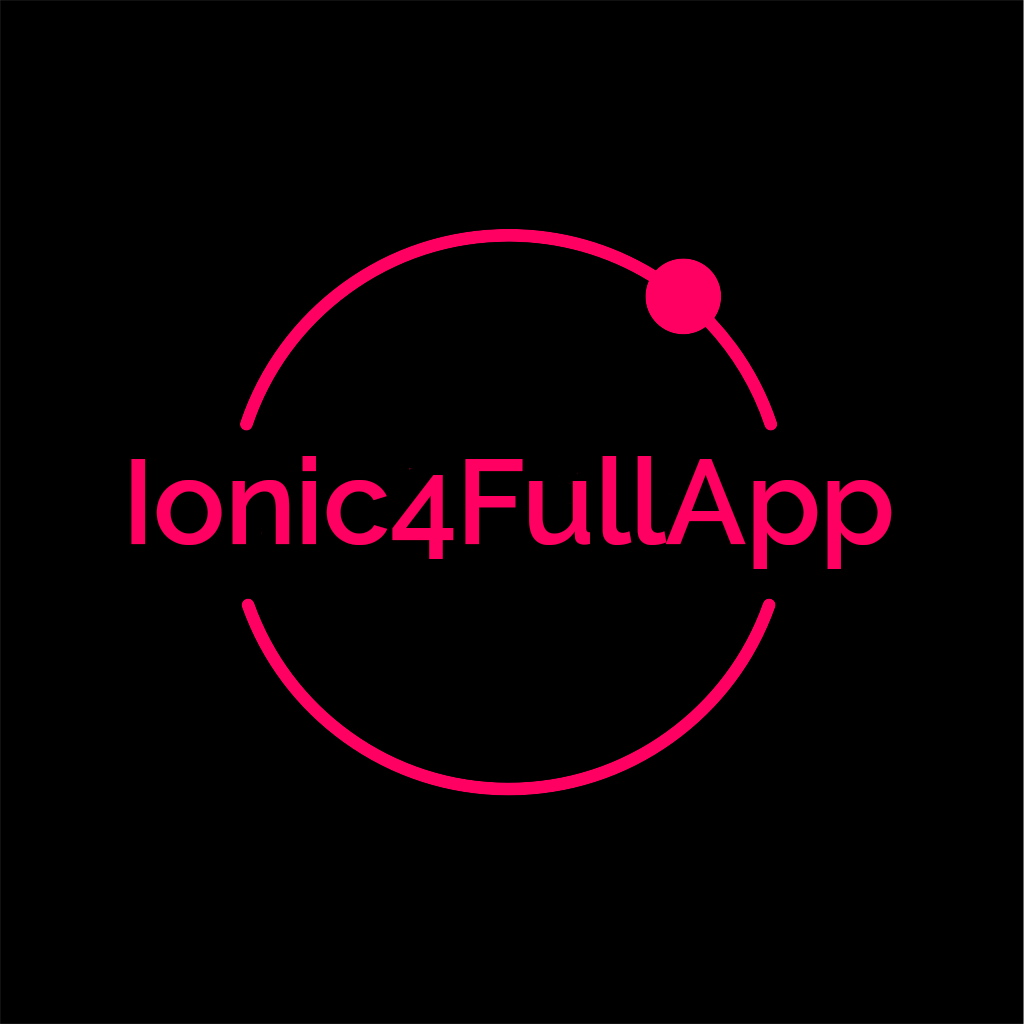
<style>
.page{position:relative;width:1024px;height:1024px;background:#000000}
.page>*{position:absolute;margin:0}
.t1{font:120px "Raleway-SemiBold";letter-spacing:-0.005em;color:#ff0062}
</style>
<div class="page">
<p class="t1" style="left:131px;top:456px;width:761px;height:113px">Ionic4FullApp</p>
</div>
